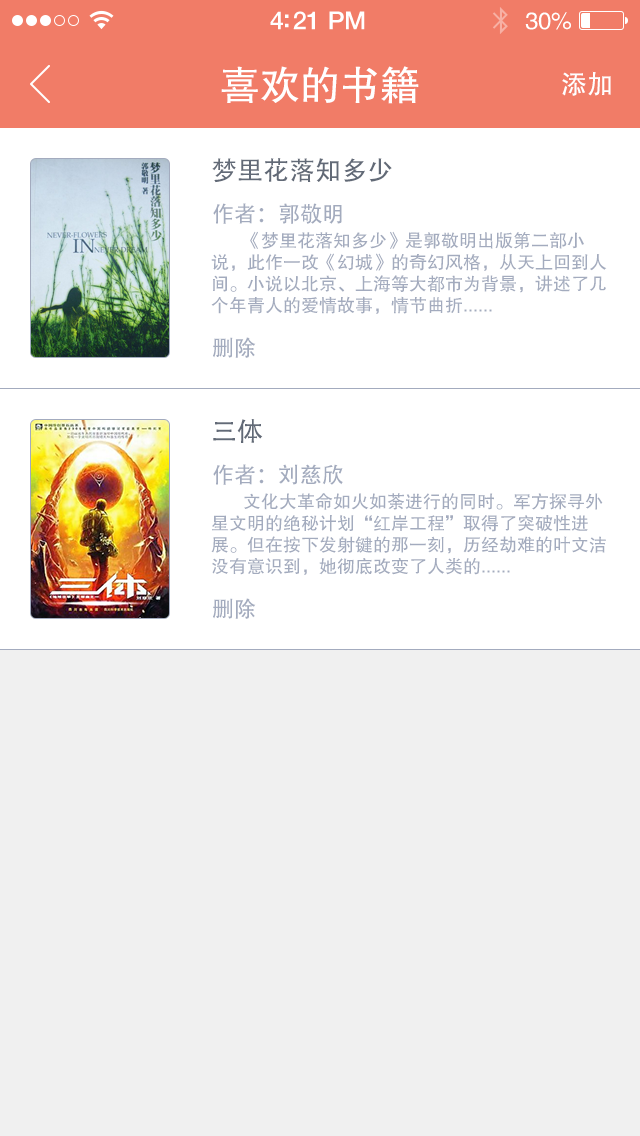
<style>
.page{position:relative;width:640px;height:1136px;background:#f0f0f0}
.page>*{position:absolute;margin:0}
.t1{font:25px "HelveticaNeue-Medium";letter-spacing:-0.02em;color:#ffffff}
.t2{font:24px "FZHTJW--GB1-0";letter-spacing:-0.02em;color:#ffffff}
.t3{font:40px "FZHTJW--GB1-0";color:#ffffff}
.t4{font:26px "AdobeHeitiStd-Regular";color:#ffffff}
.t5{font:26px "AdobeHeitiStd-Regular";color:#626a77}
.t6{font:22px "AdobeHeitiStd-Regular";color:#a3abbe}
.t7{font:18px "FZHTJW--GB1-0";color:#a3abbe}
</style>
<div class="page">
<p class="t1" style="left:270px;top:11px;width:95px;height:19px">4:21 PM</p>
<p class="t2" style="left:525px;top:12px;width:46px;height:18px">30%</p>
<p class="t3" style="left:221px;top:66px;width:198px;height:38px">喜欢的书籍</p>
<p class="t4" style="left:562px;top:71px;width:49px;height:25px">添加</p>
<p class="t5" style="left:212px;top:158px;width:180px;height:25px">梦里花落知多少</p>
<p class="t6" style="left:213px;top:203px;width:129px;height:21px">作者：郭敬明</p>
<p class="t7" style="left:211px;top:231px;width:396px;height:83px">《梦里花落知多少》是郭敬明出版第二部小说，此作一改《幻城》的奇幻风格，从天上回到人间。小说以北京、上海等大都市为背景，讲述了几个年青人的爱情故事，情节曲折......</p>
<p class="t6" style="left:213px;top:337px;width:43px;height:21px">删除</p>
<p class="t5" style="left:213px;top:419px;width:50px;height:24px">三体</p>
<p class="t6" style="left:213px;top:464px;width:130px;height:21px">作者：刘慈欣</p>
<p class="t7" style="left:211px;top:493px;width:395px;height:82px">文化大革命如火如荼进行的同时。军方探寻外星文明的绝秘计划“红岸工程”取得了突破性进展。但在按下发射键的那一刻，历经劫难的叶文洁没有意识到，她彻底改变了人类的......</p>
<p class="t6" style="left:213px;top:598px;width:43px;height:21px">删除</p>
</div>
